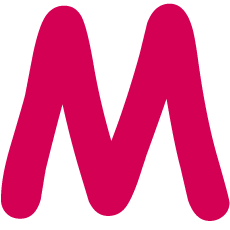
<style>
.page{position:relative;width:230px;height:230px;background:#d40054}
.page>*{position:absolute;margin:0}
.t1{font:275px "ComicSansMS-Bold";color:#d40054}
</style>
<div class="page">
<p class="t1" style="left:1px;top:3px;width:229px;height:218px">M</p>
</div>
